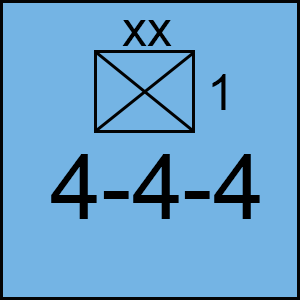
<style>
.page{position:relative;width:300px;height:300px;background:#74b4e4}
.page>*{position:absolute;margin:0}
.t1{font:50px "ArialMT";color:#000000}
.t2{font:91.7px "ArialMT";color:#000000}
</style>
<div class="page">
<p class="t1" style="left:122px;top:20px;width:50px;height:26px">xx</p>
<p class="t1" style="left:212px;top:74px;width:14px;height:36px">1</p>
<p class="t2" style="left:51px;top:154px;width:209px;height:65px">4-4-4</p>
</div>
